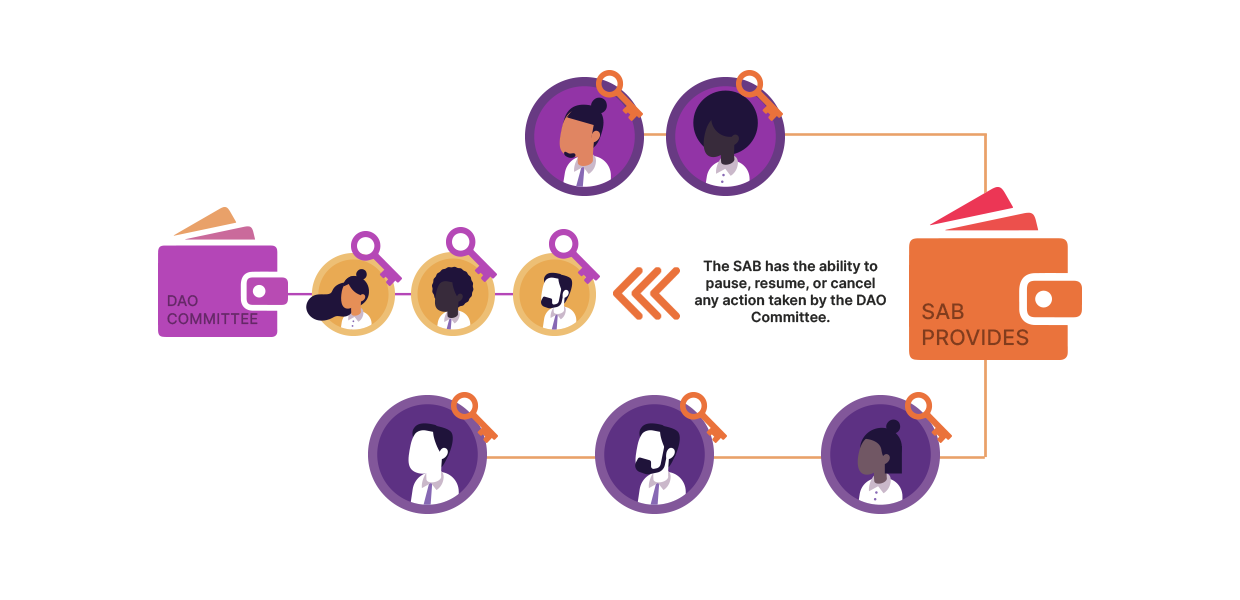
<style>
.page{position:relative;width:1240px;height:600px;background:#ffffff}
.page>*{position:absolute;margin:0}
.t1{font:14.1px "Inter-SemiBold";color:#262625}
.t2{font:14.8px "Inter-Medium";color:#652867;text-transform:uppercase}
.t3{font:21.4px "Inter-Medium";color:#813c1d;text-transform:uppercase}
</style>
<div class="page">
<p class="t1" style="left:694px;top:260px;width:192px;height:63px;text-align:center">The SAB has the ability to pause, resume, or cancel any action taken by the DAO Committee.</p>
<p class="t2" style="left:167px;top:295px;width:91px;height:30px">DAO <br>Committee</p>
<p class="t3" style="left:922px;top:303px;width:107px;height:43px">SAB <br>provides</p>
</div>
